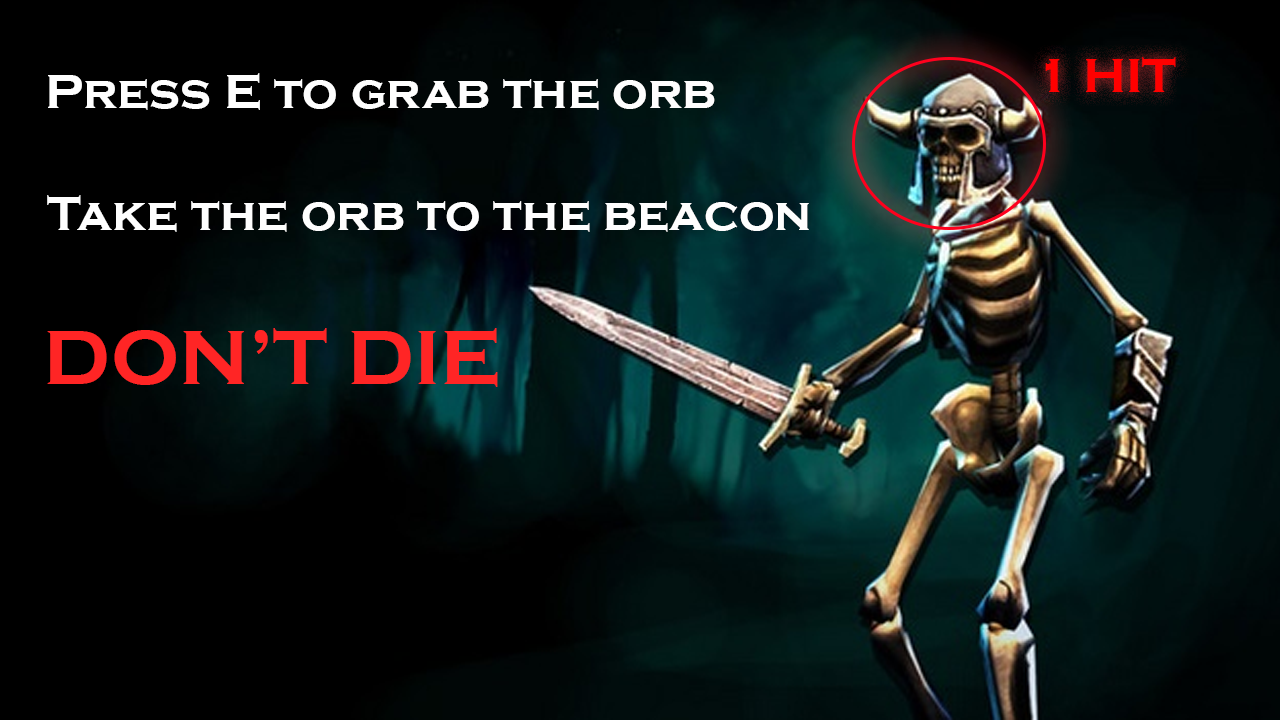
<style>
.page{position:relative;width:1280px;height:720px;background:#000000}
.page>*{position:absolute;margin:0}
.t1{font:50px "CopperplateGothic-Bold";color:#ff0000}
.t2{font:50px "CopperplateGothic-Bold";color:#fefefe}
.t3{font:80px "CopperplateGothic-Bold";color:#ff2525}
</style>
<div class="page">
<p class="t1" style="left:1045px;top:57px;width:131px;height:35px">1 HIT</p>
<p class="t2" style="left:48px;top:73px;width:667px;height:37px">Press E to grab the orb</p>
<p class="t2" style="left:47px;top:195px;width:762px;height:37px">Take the orb to the beacon</p>
<p class="t3" style="left:47px;top:328px;width:451px;height:59px">DON’T DIE</p>
</div>
